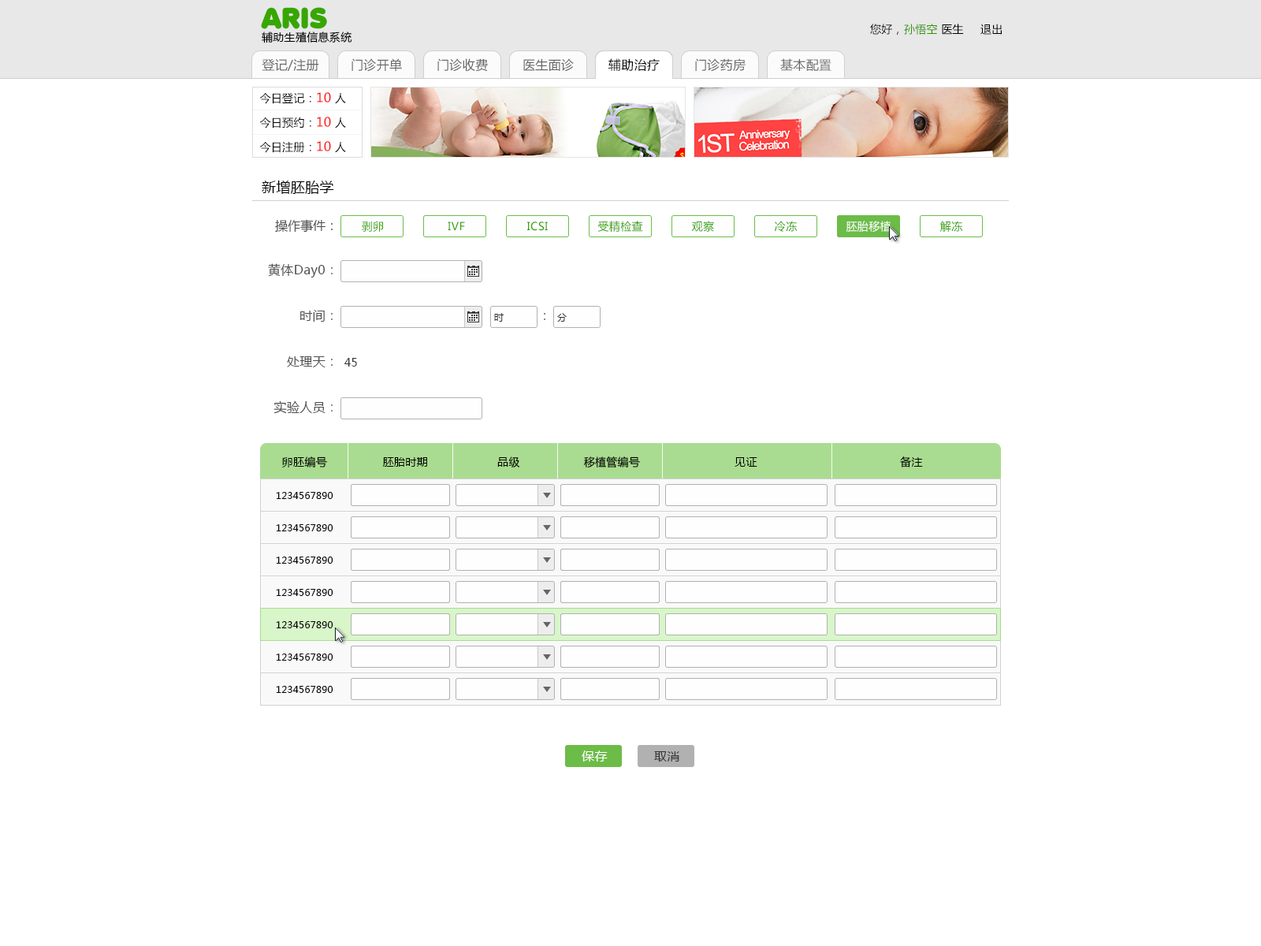
<style>
.page{position:relative;width:1261px;height:946px;background:#ffffff}
.page>*{position:absolute;margin:0}
.t1{font:14.2px "MicrosoftYaHei";letter-spacing:0.022em;color:#000000}
.t2{font:12.6px "MicrosoftYaHei";color:#4f4f4f}
.t3{font:11px "MicrosoftYaHei";letter-spacing:0.022em;color:#32a000}
.t4{font:11px "MicrosoftYaHei";letter-spacing:0.022em;color:#ffffff}
.t5{font:12.6px "MicrosoftYaHei";letter-spacing:0.022em;color:#4f4f4f}
.t6{font:12.6px "MicrosoftYaHei";color:#666666}
.t7{font:9.5px "MicrosoftYaHei";letter-spacing:0.022em;color:#333333}
.t8{font:12.6px "MicrosoftYaHei"}
.t9{font:11px "MicrosoftYaHei";letter-spacing:0.022em;color:#333333}
.t10{font:11px "MicrosoftYaHei";letter-spacing:0.022em;color:#000000}
.t11{font:9.5px "MicrosoftYaHei";letter-spacing:0.022em;color:#000000}
.t12{font:12.6px "MicrosoftYaHei";letter-spacing:0.022em;color:#ffffff}
.t13{font:12.6px "MicrosoftYaHei";letter-spacing:0.022em;color:#333333}
</style>
<div class="page">
<p class="t1" style="left:262px;top:180px;width:72px;height:14px">新增胚胎学</p>
<p class="t2" style="left:275px;top:219px;width:58px;height:13px">操作事件：</p>
<p class="t3" style="left:362px;top:221px;width:21px;height:11px">剥卵</p>
<p class="t3" style="left:448px;top:221px;width:17px;height:9px">IVF</p>
<p class="t3" style="left:527px;top:221px;width:21px;height:10px">ICSI</p>
<p class="t3" style="left:597px;top:221px;width:46px;height:11px">受精检查</p>
<p class="t3" style="left:691px;top:221px;width:23px;height:11px">观察</p>
<p class="t3" style="left:775px;top:221px;width:23px;height:11px">冷冻</p>
<p class="t4" style="left:846px;top:221px;width:45px;height:11px">胚胎移植</p>
<p class="t4" style="left:846px;top:221px;width:45px;height:11px">胚胎移植</p>
<p class="t3" style="left:940px;top:221px;width:23px;height:11px">解冻</p>
<p class="t5" style="left:268px;top:263px;width:65px;height:14px">黄体Day0<span class="t6">：</span></p>
<p class="t5" style="left:300px;top:310px;width:33px;height:12px">时间<span class="t6">：</span></p>
<p class="t7" style="left:494px;top:313px;width:10px;height:9px">时</p>
<p class="t8" style="left:544px;top:313px;width:1px;height:7px">：</p>
<p class="t7" style="left:557px;top:313px;width:10px;height:9px">分</p>
<p class="t5" style="left:287px;top:356px;width:46px;height:11px">处理天<span class="t6">：</span></p>
<p class="t9" style="left:344px;top:358px;width:13px;height:8px">45</p>
<p class="t5" style="left:273px;top:400px;width:60px;height:14px">实验人员<span class="t6">：</span></p>
<p class="t10" style="left:282px;top:456px;width:45px;height:11px">卵胚编号</p>
<p class="t10" style="left:382px;top:457px;width:45px;height:10px">胚胎时期</p>
<p class="t10" style="left:497px;top:456px;width:23px;height:11px">品级</p>
<p class="t10" style="left:584px;top:456px;width:56px;height:12px">移植管编号</p>
<p class="t10" style="left:734px;top:457px;width:23px;height:10px">见证</p>
<p class="t10" style="left:900px;top:456px;width:23px;height:11px">备注</p>
<p class="t11" style="left:276px;top:492px;width:57px;height:7px">1234567890</p>
<p class="t11" style="left:276px;top:524px;width:57px;height:7px">1234567890</p>
<p class="t11" style="left:276px;top:556px;width:57px;height:7px">1234567890</p>
<p class="t11" style="left:276px;top:589px;width:57px;height:7px">1234567890</p>
<p class="t11" style="left:276px;top:621px;width:57px;height:7px">1234567890</p>
<p class="t11" style="left:276px;top:653px;width:57px;height:7px">1234567890</p>
<p class="t11" style="left:276px;top:686px;width:57px;height:7px">1234567890</p>
<p class="t12" style="left:582px;top:750px;width:26px;height:11px">保存</p>
<p class="t13" style="left:654px;top:751px;width:25px;height:10px">取消</p>
</div>
